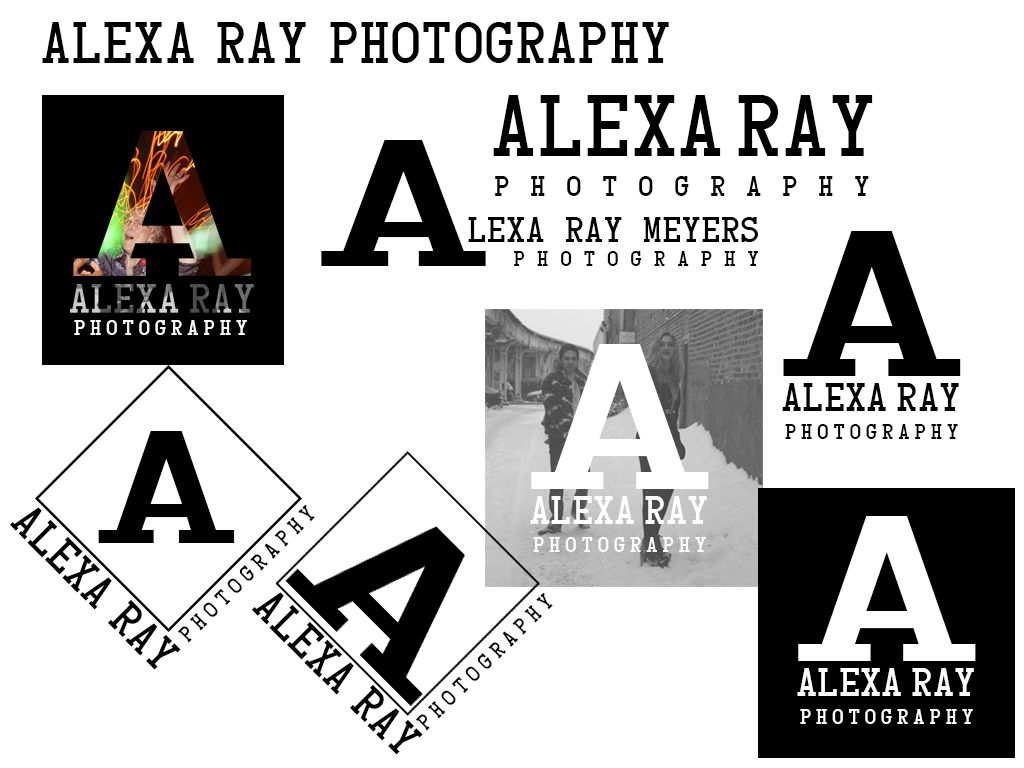
<style>
.page{position:relative;width:1024px;height:768px;background:#ffffff}
.page>*{position:absolute;margin:0}
.t1{font:48px "CardCharacters";color:#000000}
.t2{font:72px "CardCharacters";color:#000000}
.t3{font:150px "CardCharacters";color:#000000;scale:2 1}
.t4{font:24px "CardCharacters";letter-spacing:0.85em;color:#000000}
.t5{font:30px "CardCharacters";color:#000000}
.t6{font:172.5px "CardCharacters";color:#000000;scale:1.87 1}
.t7{font:18px "CardCharacters";letter-spacing:0.65em;color:#000000}
.t8{font:18px "CardCharacters";letter-spacing:0.25em;color:#ffffff}
.t9{font:172.5px "CardCharacters";color:#ffffff;scale:1.87 1}
.t10{font:33px "CardCharacters";color:#000000}
.t11{font:18px "CardCharacters";letter-spacing:0.25em;color:#000000}
.t12{font:132.2px "CardCharacters";color:#000000;scale:1.87 1}
.t13{font:33px "CardCharacters";color:#ffffff}
.t14{font:38px "CardCharacters";color:#000000}
.t15{font:18px "CardCharacters";letter-spacing:0.3em;color:#000000}
</style>
<div class="page">
<p class="t1" style="left:42px;top:22px;width:627px;height:41px">Alexa Ray Photography</p>
<p class="t2" style="left:493px;top:95px;width:380px;height:61px">ALEXA Ray</p>
<p class="t3" style="left:321px;top:140px;width:165px;height:126px">A</p>
<p class="t4" style="left:495px;top:176px;width:374px;height:20px">photography</p>
<p class="t5" style="left:468px;top:217px;width:290px;height:25px">lexa Ray Meyers</p>
<p class="t6" style="left:783px;top:231px;width:178px;height:145px">A</p>
<p class="t7" style="left:514px;top:251px;width:245px;height:15px">photography</p>
<p class="t8" style="left:74px;top:320px;width:173px;height:15px">photography</p>
<p class="t9" style="left:531px;top:344px;width:178px;height:145px">A</p>
<p class="t10" style="left:782px;top:383px;width:177px;height:28px">Alexa Ray</p>
<p class="t11" style="left:785px;top:424px;width:173px;height:15px">photography</p>
<p class="t12" style="left:98px;top:431px;width:137px;height:112px">A</p>
<p class="t13" style="left:530px;top:496px;width:177px;height:28px">Alexa Ray</p>
<p class="t14" style="left:10px;top:507px;width:171px;height:163px;rotate:45deg">alexa ray</p>
<p class="t9" style="left:798px;top:516px;width:178px;height:145px">A</p>
<p class="t8" style="left:533px;top:537px;width:173px;height:15px">photography</p>
<p class="t14" style="left:252px;top:592px;width:171px;height:163px;rotate:45deg">alexa ray</p>
<p class="t15" style="left:416px;top:592px;width:137px;height:139px;rotate:-45deg">photography</p>
<p class="t13" style="left:797px;top:668px;width:177px;height:28px">Alexa Ray</p>
<p class="t8" style="left:800px;top:709px;width:173px;height:15px">photography</p>
</div>
